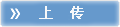
<style>
.page{position:relative;width:120px;height:27px;background:#6699cc}
.page>*{position:absolute;margin:0}
.t1{font:14px "SimSun";color:#f7f8f9;font-weight:bold}
</style>
<div class="page">
<p class="t1" style="left:39px;top:6px;width:45px;height:13px">上  传</p>
</div>
